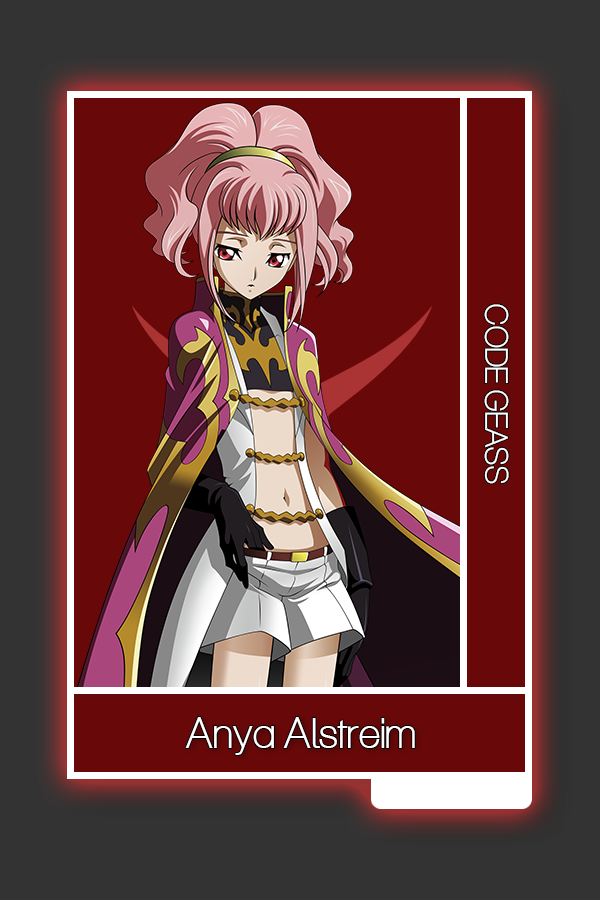
<style>
.page{position:relative;width:600px;height:900px;background:#680808}
.page>*{position:absolute;margin:0}
.t1{font:31.2px "Aliquam";color:#ffffff}
.t2{font:43.2px "Aliquam";color:#ffffff}
</style>
<div class="page">
<p class="t1" style="left:484px;top:304px;width:25px;height:180px;rotate:90deg">CODE GEASS</p>
<p class="t2" style="left:185px;top:717px;width:230px;height:38px">Anya Alstreim</p>
</div>
